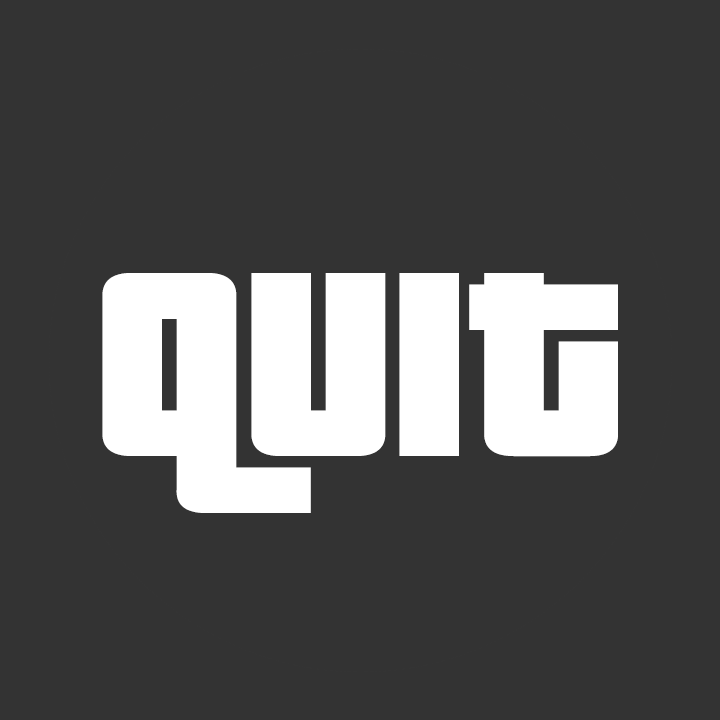
<style>
.page{position:relative;width:720px;height:720px;background:#333333}
.page>*{position:absolute;margin:0}
.t1{font:361.1px "Pricedown";color:#ffffff}
</style>
<div class="page">
<p class="t1" style="left:102px;top:273px;width:516px;height:240px">QUIT</p>
</div>
